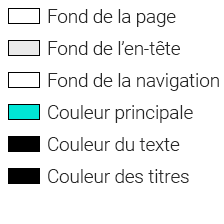
<style>
.page{position:relative;width:224px;height:224px;background:#ffffff}
.page>*{position:absolute;margin:0}
.t1{font:18.6px "Roboto-Light";color:#282828}
</style>
<div class="page">
<p class="t1" style="left:48px;top:9px;width:128px;height:18px">Fond de la page</p>
<p class="t1" style="left:48px;top:41px;width:132px;height:14px">Fond de l’en-tête</p>
<p class="t1" style="left:48px;top:73px;width:171px;height:18px">Fond de la navigation</p>
<p class="t1" style="left:48px;top:105px;width:145px;height:18px">Couleur principale</p>
<p class="t1" style="left:48px;top:137px;width:132px;height:14px">Couleur du texte</p>
<p class="t1" style="left:48px;top:169px;width:141px;height:14px">Couleur des titres</p>
</div>
